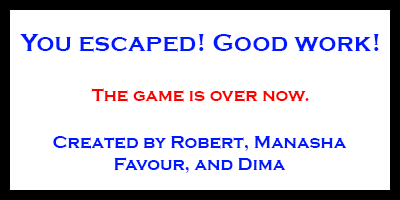
<style>
.page{position:relative;width:400px;height:200px;background:#ffffff}
.page>*{position:absolute;margin:0}
.t1{font:25.4px "CopperplateGothic-Bold";color:#0018ff}
.t2{font:18px "CopperplateGothic-Bold";color:#ff0000}
.t3{font:18px "CopperplateGothic-Bold";color:#0018ff}
</style>
<div class="page">
<p class="t1" style="left:20px;top:34px;width:359px;height:18px">You escaped! Good work!</p>
<p class="t2" style="left:91px;top:88px;width:218px;height:14px">The game is over now.</p>
<p class="t3" style="left:53px;top:136px;width:294px;height:37px;text-align:center">Created by Robert, Manasha<br>Favour, and Dima</p>
</div>
